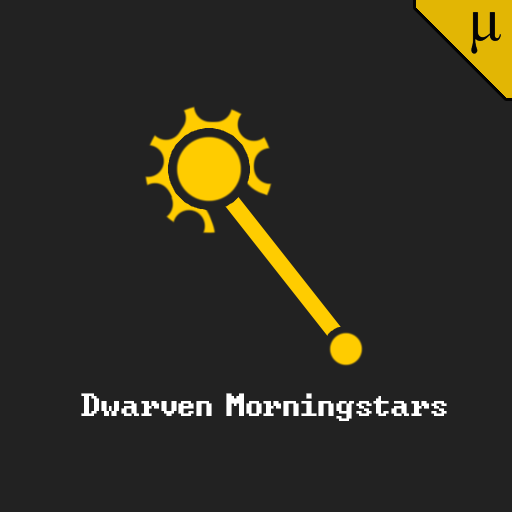
<style>
.page{position:relative;width:512px;height:512px;background:#222222}
.page>*{position:absolute;margin:0}
.t1{font:40px "DwarfFortressVan";color:#ffffff}
</style>
<div class="page">
<p class="t1" style="left:81px;top:393px;width:366px;height:28px">Dwarven Morningstars</p>
</div>
